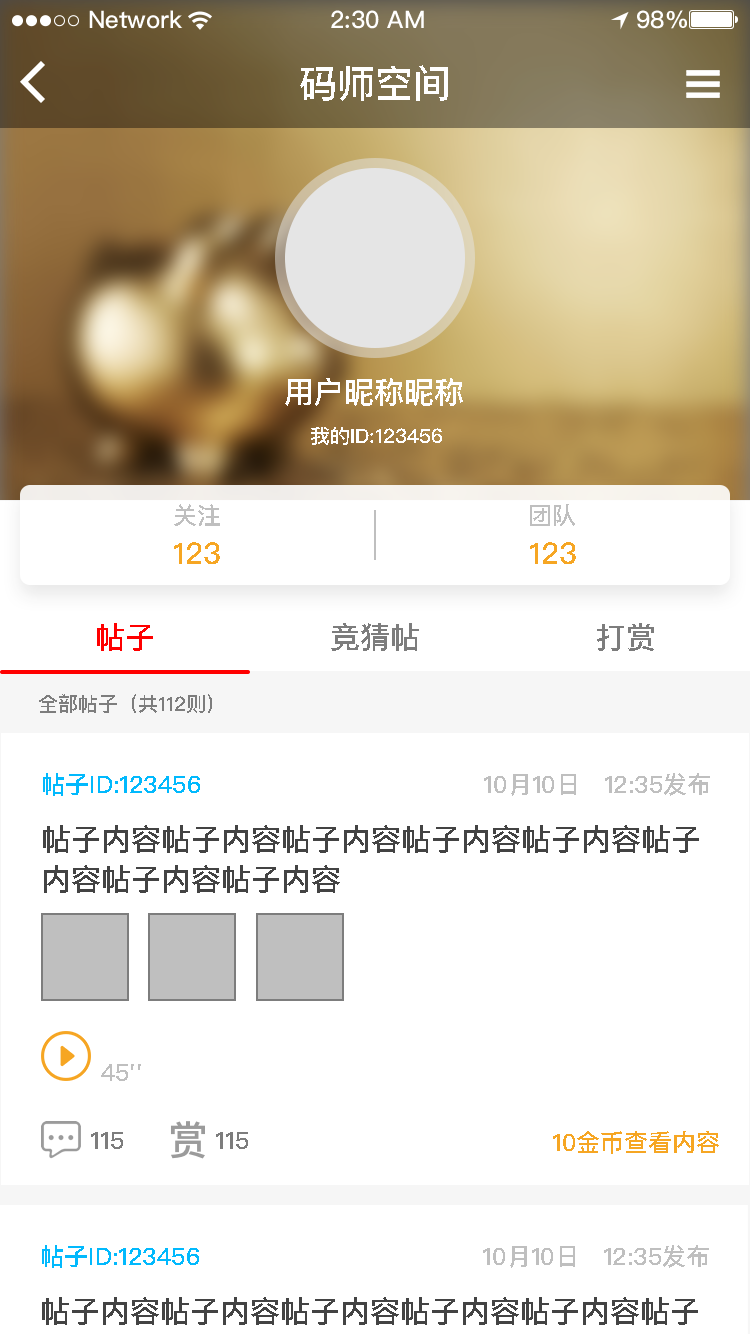
<style>
.page{position:relative;width:750px;height:1334px;background:#ffffff}
.page>*{position:absolute;margin:0}
.t1{font:38px "PingFangSC-Medium";color:#ffffff;text-transform:uppercase}
.t2{font:30px "PingFangSC-Medium";color:#ffffff;text-transform:uppercase}
.t3{font:20px "PingFangSC-Medium";color:#ffffff;text-transform:uppercase}
.t4{font:24px "PingFangSC-Medium";color:#bfbfbf;text-transform:uppercase}
.t5{font:30px "PingFangSC-Medium";color:#f6a623;text-transform:uppercase}
.t6{font:30px "PingFangSC-Medium";color:#ff0000;text-transform:uppercase}
.t7{font:30px "PingFangSC-Medium";color:#7d7d7d;text-transform:uppercase}
.t8{font:20px "PingFangSC-Medium";color:#7d7d7d;text-transform:uppercase}
.t9{font:24px "PingFangSC-Medium";color:#01b9fd;text-transform:uppercase}
.t10{font:24px "PingFangSC-Medium";color:#01b9fd}
.t11{font:30px/40px "PingFangSC-Medium";color:#434343;text-transform:uppercase}
.t12{font:24px "PingFangSC-Medium";color:#7d7d7d;text-transform:uppercase}
.t13{font:24px "PingFangSC-Medium";color:#f6a623;text-transform:uppercase}
</style>
<div class="page">
<p class="t1" style="left:300px;top:65px;width:148px;height:36px">码师空间</p>
<p class="t2" style="left:285px;top:378px;width:178px;height:28px">用户昵称昵称</p>
<p class="t3" style="left:311px;top:427px;width:131px;height:18px">我的id:123456</p>
<p class="t4" style="left:174px;top:504px;width:46px;height:22px">关注</p>
<p class="t4" style="left:530px;top:504px;width:45px;height:22px">团队</p>
<p class="t5" style="left:174px;top:542px;width:46px;height:22px">123</p>
<p class="t5" style="left:530px;top:542px;width:46px;height:22px">123</p>
<p class="t6" style="left:97px;top:623px;width:56px;height:28px">帖子</p>
<p class="t7" style="left:331px;top:623px;width:88px;height:28px">竞猜帖</p>
<p class="t7" style="left:597px;top:623px;width:57px;height:28px">打赏</p>
<p class="t8" style="left:39px;top:694px;width:173px;height:19px">全部帖子（共112则）</p>
<p class="t9" style="left:43px;top:773px;width:157px;height:23px">帖子<span class="t10">Ｉ</span>D:123456</p>
<p class="t4" style="left:484px;top:773px;width:226px;height:23px">10月10日   12:35发布</p>
<p class="t11" style="left:43px;top:825px;width:656px;height:68px">帖子内容帖子内容帖子内容帖子内容帖子内容帖子<br>内容帖子内容帖子内容</p>
<p class="t4" style="left:101px;top:1064px;width:40px;height:17px">45''</p>
<p class="t12" style="left:91px;top:1132px;width:32px;height:17px">115</p>
<p class="t12" style="left:216px;top:1132px;width:32px;height:17px">115</p>
<p class="t13" style="left:553px;top:1131px;width:166px;height:23px">10金币查看内容</p>
<p class="t9" style="left:42px;top:1245px;width:157px;height:23px">帖子<span class="t10">Ｉ</span>D:123456</p>
<p class="t4" style="left:483px;top:1245px;width:226px;height:23px">10月10日   12:35发布</p>
</div>
